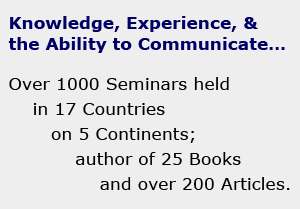
<style>
.page{position:relative;width:300px;height:209px;background:#eeeeee}
.page>*{position:absolute;margin:0}
.t1{font:29.2px/20.8px "Verdana-Bold";color:#000066}
.t2{font:29.7px/25px "Verdana";color:#000000}
</style>
<div class="page">
<p class="t1" style="left:8px;top:16px;width:277px;height:37px">Knowledge, Experience, &amp;<br>the Ability to Communicate…</p>
<p class="t2" style="left:9px;top:77px;width:281px;height:113px">Over 1000 Seminars held<br>    in 17 Countries<br>       on 5 Continents;<br>           author of 25 Books<br>               and over 200 Articles.</p>
</div>
